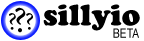
<style>
.page{position:relative;width:144px;height:41px;background:#ffffff}
.page>*{position:absolute;margin:0}
.t1{font:29.5px "CooperBlackStd";color:#000000}
.t2{font:25px "MinionPro-Regular";color:#000000}
.t3{font:36px "MinionPro-Regular";color:#000000}
.t4{font:12.7px "ArialNarrow";color:#000000}
</style>
<div class="page">
<p class="t1" style="left:43px;top:4px;width:97px;height:27px">sillyio</p>
<p class="t2" style="left:9px;top:13px;width:7px;height:17px">?</p>
<p class="t3" style="left:15px;top:7px;width:11px;height:26px">?</p>
<p class="t2" style="left:26px;top:13px;width:7px;height:17px">?</p>
<p class="t4" style="left:113px;top:28px;width:26px;height:10px">BETA</p>
</div>
